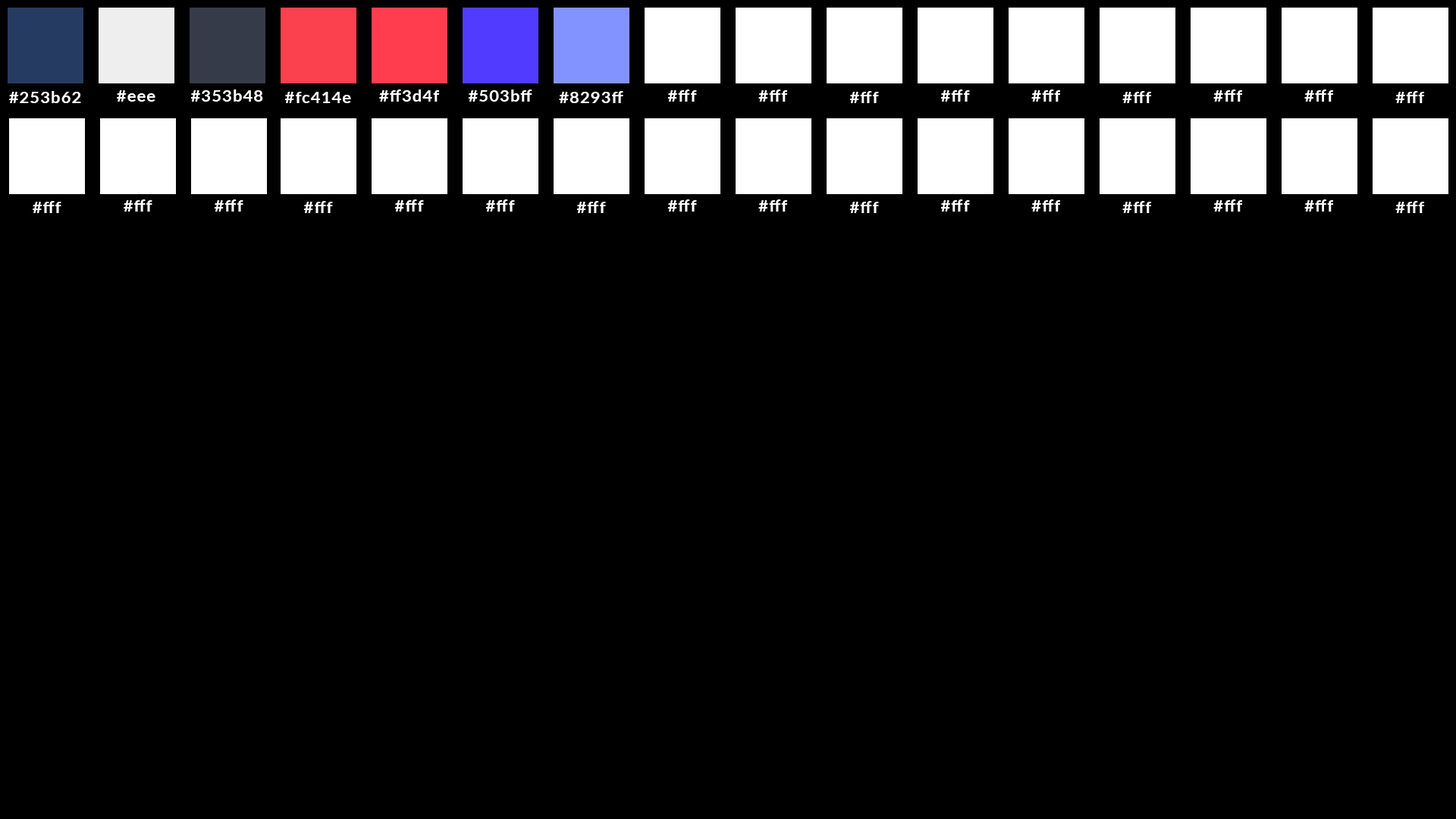
<style>
.page{position:relative;width:1456px;height:819px;background:#000000}
.page>*{position:absolute;margin:0}
.t1{font:15.7px "Lato-Bold";letter-spacing:0.05em;color:#ffffff;scale:1.06 1}
</style>
<div class="page">
<p class="t1" style="left:190px;top:89px;width:73px;height:13px">#353b48</p>
<p class="t1" style="left:379px;top:89px;width:60px;height:13px">#ff3d4f</p>
<p class="t1" style="left:468px;top:89px;width:64px;height:13px">#503bff</p>
<p class="t1" style="left:667px;top:89px;width:30px;height:13px">#fff</p>
<p class="t1" style="left:758px;top:89px;width:29px;height:13px">#fff</p>
<p class="t1" style="left:940px;top:89px;width:30px;height:13px">#fff</p>
<p class="t1" style="left:1031px;top:89px;width:29px;height:13px">#fff</p>
<p class="t1" style="left:1213px;top:89px;width:29px;height:13px">#fff</p>
<p class="t1" style="left:1304px;top:89px;width:29px;height:13px">#fff</p>
<p class="t1" style="left:9px;top:91px;width:72px;height:12px">#253b62</p>
<p class="t1" style="left:117px;top:90px;width:38px;height:12px">#eee</p>
<p class="t1" style="left:284px;top:92px;width:67px;height:11px">#fc414e</p>
<p class="t1" style="left:559px;top:91px;width:64px;height:12px">#8293ff</p>
<p class="t1" style="left:849px;top:91px;width:30px;height:12px">#fff</p>
<p class="t1" style="left:1122px;top:91px;width:29px;height:12px">#fff</p>
<p class="t1" style="left:1395px;top:91px;width:29px;height:12px">#fff</p>
<p class="t1" style="left:33px;top:201px;width:28px;height:12px">#fff</p>
<p class="t1" style="left:124px;top:199px;width:28px;height:13px">#fff</p>
<p class="t1" style="left:214px;top:199px;width:29px;height:13px">#fff</p>
<p class="t1" style="left:303px;top:201px;width:30px;height:12px">#fff</p>
<p class="t1" style="left:394px;top:199px;width:30px;height:13px">#fff</p>
<p class="t1" style="left:485px;top:199px;width:30px;height:13px">#fff</p>
<p class="t1" style="left:576px;top:201px;width:30px;height:12px">#fff</p>
<p class="t1" style="left:667px;top:199px;width:30px;height:13px">#fff</p>
<p class="t1" style="left:758px;top:199px;width:29px;height:13px">#fff</p>
<p class="t1" style="left:849px;top:201px;width:30px;height:12px">#fff</p>
<p class="t1" style="left:940px;top:199px;width:30px;height:13px">#fff</p>
<p class="t1" style="left:1031px;top:199px;width:29px;height:13px">#fff</p>
<p class="t1" style="left:1122px;top:201px;width:29px;height:12px">#fff</p>
<p class="t1" style="left:1213px;top:199px;width:29px;height:13px">#fff</p>
<p class="t1" style="left:1304px;top:199px;width:29px;height:13px">#fff</p>
<p class="t1" style="left:1395px;top:201px;width:29px;height:12px">#fff</p>
</div>
